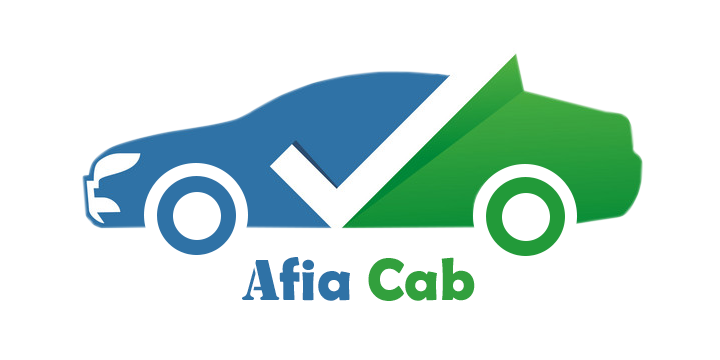
<style>
.page{position:relative;width:720px;height:360px;background:#ffffff}
.page>*{position:absolute;margin:0}
.t1{font:60px "BerlinSansFBDemi-Bold";color:#2f72a6}
.t2{font:60px "Stencil";color:#2f72a6}
.t3{font:60px "BerlinSansFBDemi-Bold";color:#32a03d}
</style>
<div class="page">
<p class="t1" style="left:242px;top:257px;width:233px;height:44px"><span class="t2">A</span>fia<span class="t3"> Cab</span></p>
</div>
